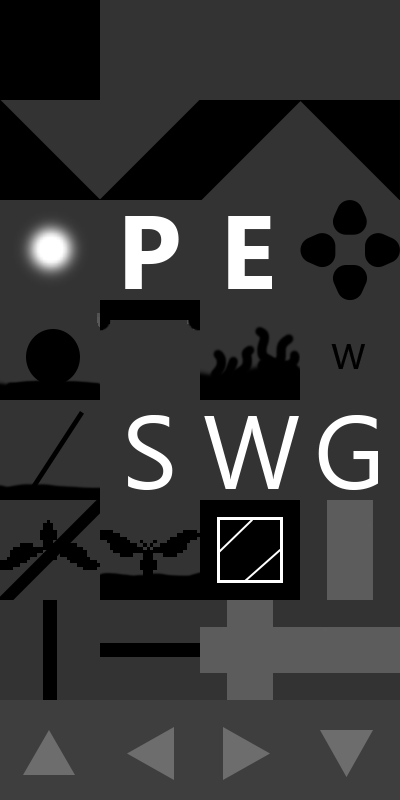
<style>
.page{position:relative;width:400px;height:800px;background:#333333}
.page>*{position:absolute;margin:0}
.t1{font:104.2px "MicrosoftTaiLe-Bold";color:#ffffff}
.t2{font:47.8px "MicrosoftTaiLe";color:#000000}
.t3{font:104.2px "MicrosoftTaiLe";color:#ffffff}
</style>
<div class="page">
<p class="t1" style="left:125px;top:216px;width:54px;height:73px">P</p>
<p class="t1" style="left:228px;top:216px;width:44px;height:73px">E</p>
<p class="t2" style="left:331px;top:344px;width:34px;height:25px">w</p>
<p class="t3" style="left:128px;top:415px;width:45px;height:75px">S</p>
<p class="t3" style="left:204px;top:416px;width:95px;height:73px">W</p>
<p class="t3" style="left:318px;top:415px;width:60px;height:75px">G</p>
</div>
